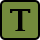
<style>
.page{position:relative;width:40px;height:40px;background:#738a3c}
.page>*{position:absolute;margin:0}
.t1{font:30px "LucidaBright-Demi";color:#000000}
</style>
<div class="page">
<p class="t1" style="left:10px;top:9px;width:21px;height:22px">T</p>
</div>
